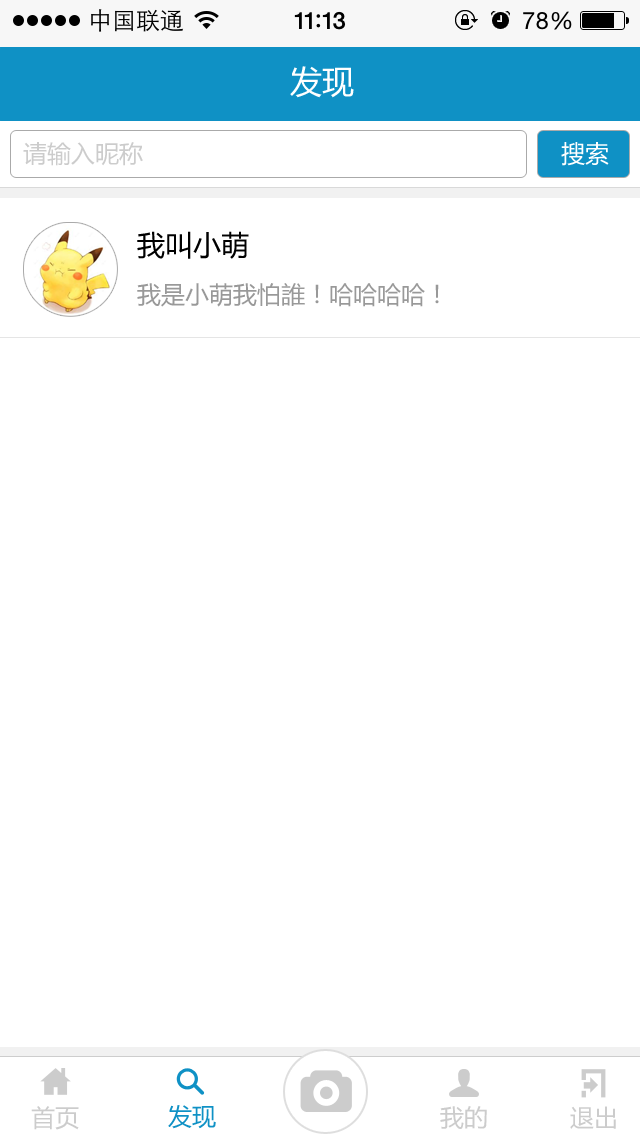
<style>
.page{position:relative;width:640px;height:1136px;background:#ffffff}
.page>*{position:absolute;margin:0}
.t1{font:32px "MicrosoftYaHei";color:#ffffff}
.t2{font:24px "MicrosoftYaHei";color:#cccccc}
.t3{font:24px "MicrosoftYaHei";color:#ffffff}
.t4{font:28px "MicrosoftYaHei";color:#000000}
.t5{font:24px "MicrosoftYaHei";color:#999999}
.t6{font:24px "MicrosoftYaHei";color:#0f91c5}
</style>
<div class="page">
<p class="t1" style="left:290px;top:66px;width:64px;height:32px">发现</p>
<p class="t2" style="left:23px;top:142px;width:120px;height:24px">请输入昵称</p>
<p class="t3" style="left:561px;top:142px;width:48px;height:24px">搜索</p>
<p class="t4" style="left:137px;top:231px;width:112px;height:28px">我叫小萌</p>
<p class="t5" style="left:137px;top:283px;width:302px;height:24px">我是小萌我怕誰！哈哈哈哈！</p>
<p class="t2" style="left:31px;top:1106px;width:48px;height:24px">首页</p>
<p class="t6" style="left:168px;top:1105px;width:48px;height:24px">发现</p>
<p class="t2" style="left:440px;top:1106px;width:47px;height:23px">我的</p>
<p class="t2" style="left:570px;top:1106px;width:46px;height:23px">退出</p>
</div>
